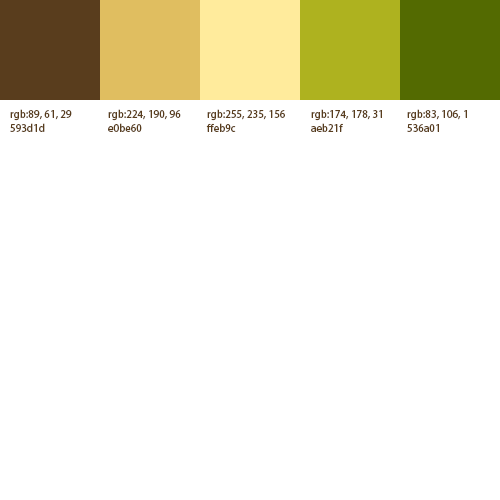
<style>
.page{position:relative;width:500px;height:500px;background:#ffffff}
.page>*{position:absolute;margin:0}
.t1{font:10px/14px "AdobeHeitiStd-Regular";color:#593d1d}
.t2{font:10px/32px "AdobeHeitiStd-Regular";color:#593d1d}
</style>
<div class="page">
<p class="t1" style="left:10px;top:109px;width:62px;height:23px">rgb:89, 61, 29<br><span class="t2">593d1d</span></p>
<p class="t1" style="left:108px;top:109px;width:73px;height:23px">rgb:224, 190, 96<br><span class="t2">e0be60</span></p>
<p class="t1" style="left:206px;top:109px;width:79px;height:23px">rgb:255, 235, 156<br><span class="t2">ffeb9c</span></p>
<p class="t1" style="left:311px;top:109px;width:71px;height:23px">rgb:174, 178, 31<br><span class="t2">aeb21f</span></p>
<p class="t1" style="left:407px;top:109px;width:60px;height:23px">rgb:83, 106, 1<br><span class="t2">536a01</span></p>
</div>
